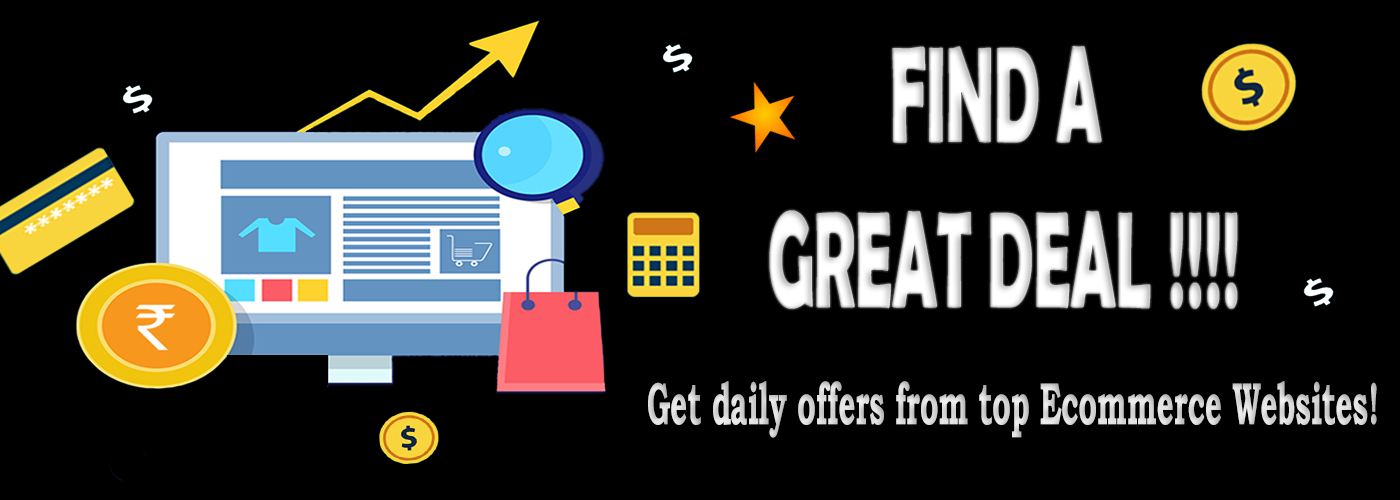
<style>
.page{position:relative;width:1400px;height:500px;background:#000000}
.page>*{position:absolute;margin:0}
.t1{font:137.5px "BerlinSansFBDemi-Bold";color:#ffffff;scale:0.47 1}
.t2{font:60.1px "BookmanOldStyle-Bold";color:#d7d7d7;scale:0.5 1}
</style>
<div class="page">
<p class="t1" style="left:769px;top:46px;width:469px;height:263px;text-align:center">FIND A <br>GREAT DEAL !!!!</p>
<p class="t2" style="left:648px;top:381px;width:729px;height:57px">Get daily offers from top Ecommerce Websites!</p>
</div>
